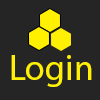
<style>
.page{position:relative;width:100px;height:100px;background:#262525}
.page>*{position:absolute;margin:0}
.t1{font:36px "MyriadPro-Regular";color:#fff004}
</style>
<div class="page">
<p class="t1" style="left:11px;top:55px;width:81px;height:32px">Login</p>
</div>
